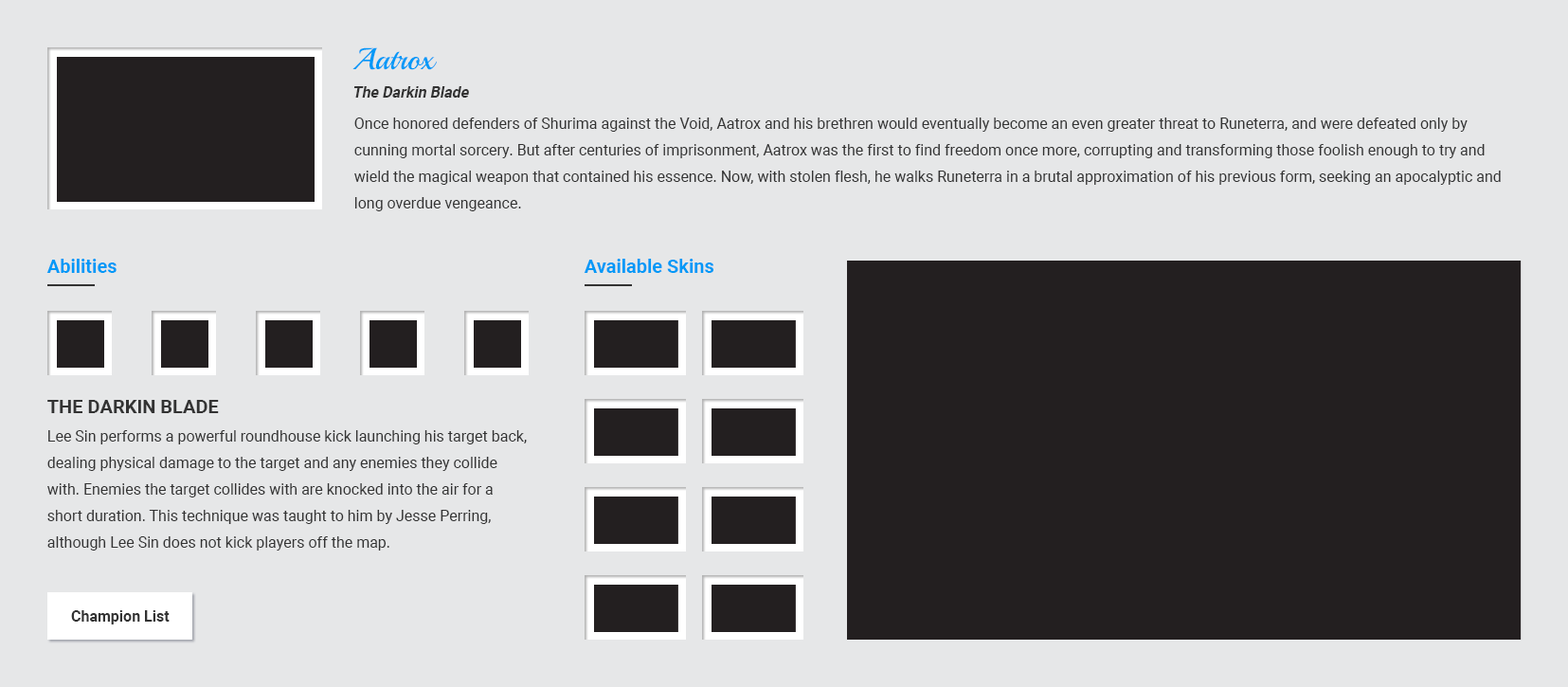
<style>
.page{position:relative;width:1568px;height:687px;background:#e6e7e8}
.page>*{position:absolute;margin:0}
.t1{font:30.3px "Playball-Regular";color:#0099f7}
.t2{font:15.2px "Roboto-Bold";color:#333333;font-style:italic}
.t3{font:15.2px/26.5px "Roboto-Regular";color:#333333}
.t4{font:18.9px "Roboto-Bold";color:#0099f7}
.t5{font:18.9px "Roboto-Bold";color:#333333;text-transform:uppercase}
.t6{font:15.2px "Roboto-Bold";color:#333333}
</style>
<div class="page">
<p class="t1" style="left:352px;top:47px;width:85px;height:23px">Aatrox</p>
<p class="t2" style="left:353px;top:86px;width:116px;height:12px">The Darkin Blade</p>
<p class="t3" style="left:354px;top:117px;width:1147px;height:94px">Once honored defenders of Shurima against the Void, Aatrox and his brethren would eventually become an even greater threat to Runeterra, and were defeated only by cunning mortal sorcery. But after centuries of imprisonment, Aatrox was the first to find freedom once more, corrupting and transforming those foolish enough to try and wield the magical weapon that contained his essence. Now, with stolen flesh, he walks Runeterra in a brutal approximation of his previous form, seeking an apocalyptic and long overdue vengeance.</p>
<p class="t4" style="left:46px;top:259px;width:71px;height:14px">Abilities</p>
<p class="t4" style="left:584px;top:259px;width:129px;height:14px">Available Skins</p>
<p class="t5" style="left:47px;top:400px;width:172px;height:13px">The Darkin Blade</p>
<p class="t3" style="left:47px;top:430px;width:480px;height:120px">Lee Sin performs a powerful roundhouse kick launching his target back, dealing physical damage to the target and any enemies they collide with. Enemies the target collides with are knocked into the air for a short duration. This technique was taught to him by Jesse Perring, although Lee Sin does not kick players off the map.</p>
<p class="t6" style="left:71px;top:610px;width:99px;height:14px">Champion List</p>
</div>
